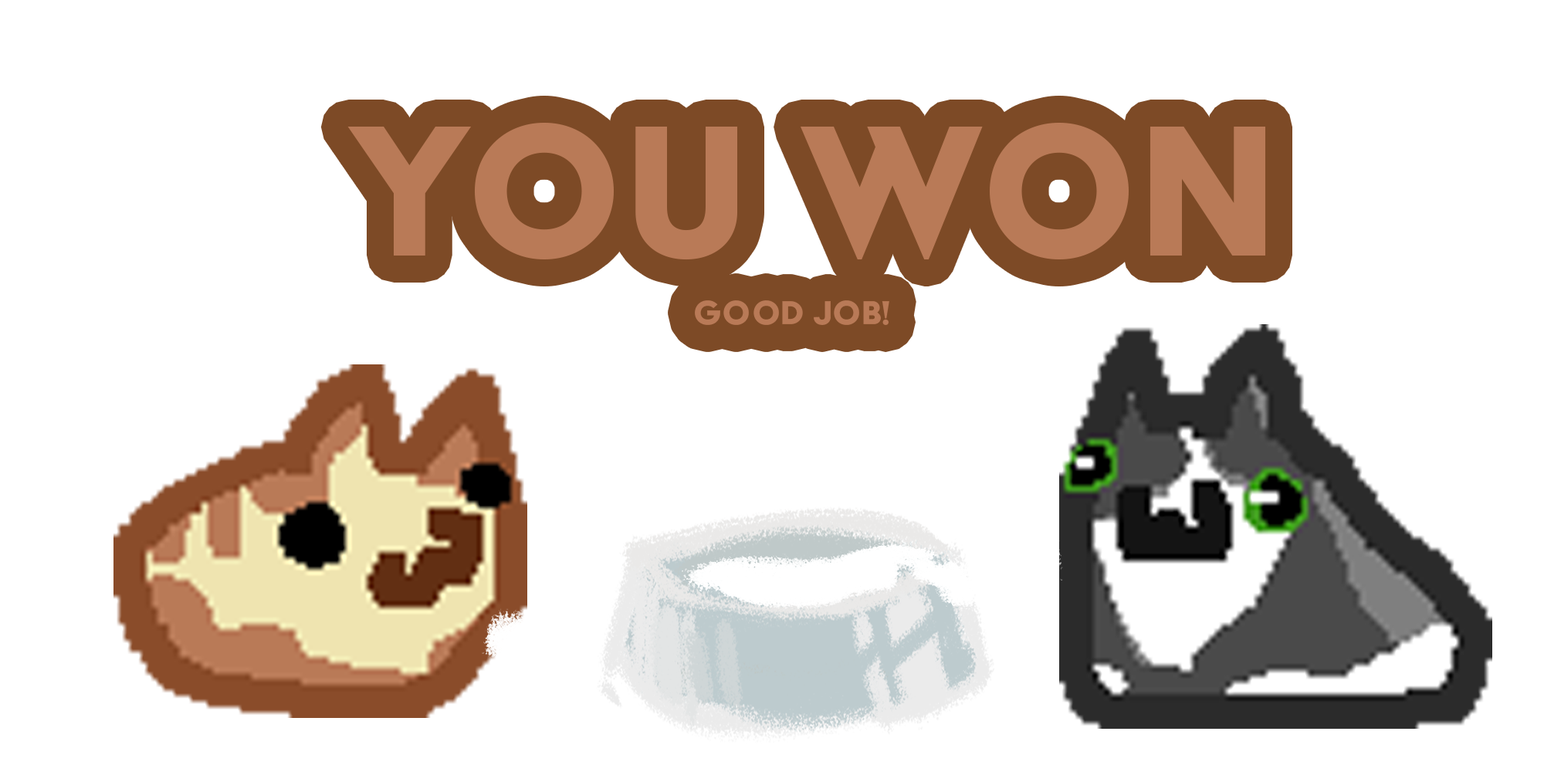
<style>
.page{position:relative;width:1544px;height:772px;background:#ffffff}
.page>*{position:absolute;margin:0}
.t1{font:215.2px "AcierBATText-Solid";color:#b97a57}
.t2{font:38.6px "AcierBATText-Solid";color:#b97a57}
</style>
<div class="page">
<p class="t1" style="left:347px;top:123px;width:919px;height:137px">YOU WON</p>
<p class="t2" style="left:695px;top:300px;width:195px;height:25px">good job!</p>
</div>
